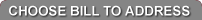
<style>
.page{position:relative;width:202px;height:20px;background:#858585}
.page>*{position:absolute;margin:0}
.t1{font:13.3px "Arial-BoldMT";color:#ffffff}
</style>
<div class="page">
<p class="t1" style="left:9px;top:5px;width:181px;height:11px">CHOOSE BILL TO ADDRESS</p>
</div>
